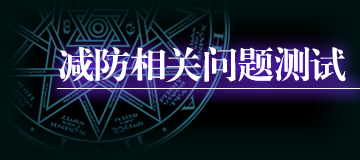
<style>
.page{position:relative;width:360px;height:160px}
.page>*{position:absolute;margin:0}
.t1{font:36px "CTBiaoSongSJ";color:#ffffff;text-transform:uppercase}
</style>
<div class="page">
<p class="t1" style="left:58px;top:47px;width:288px;height:35px">减防相关问题测试</p>
</div>
